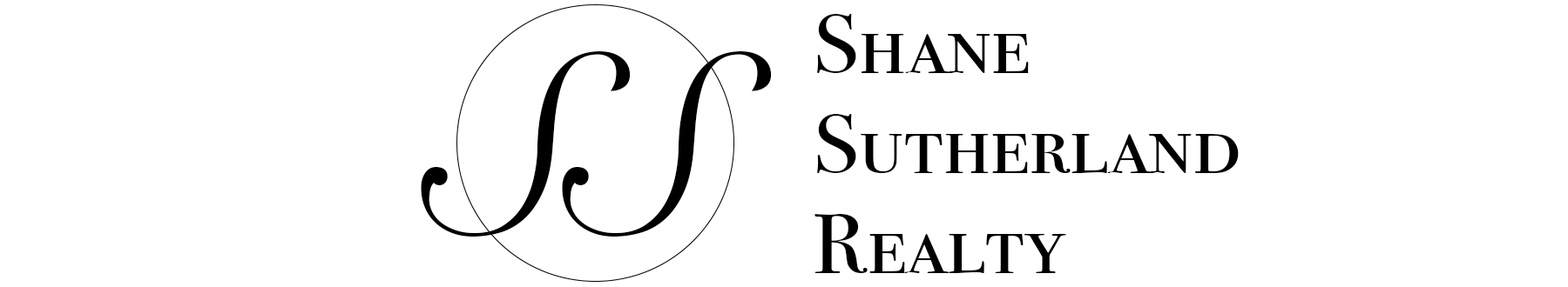
<style>
.page{position:relative;width:1568px;height:287px;background:#ffffff}
.page>*{position:absolute;margin:0}
.t1{font:83.5px "BodoniSvtyTwoSCITCTT-Book";letter-spacing:0.005em;color:#000000;scale:1.1 1}
.t2{font:254.1px "SnellRoundhand";color:#000000}
</style>
<div class="page">
<p class="t1" style="left:814px;top:14px;width:425px;height:260px">Shane<br>Sutherland<br>Realty</p>
<p class="t2" style="left:421px;top:51px;width:350px;height:186px">SS</p>
</div>
